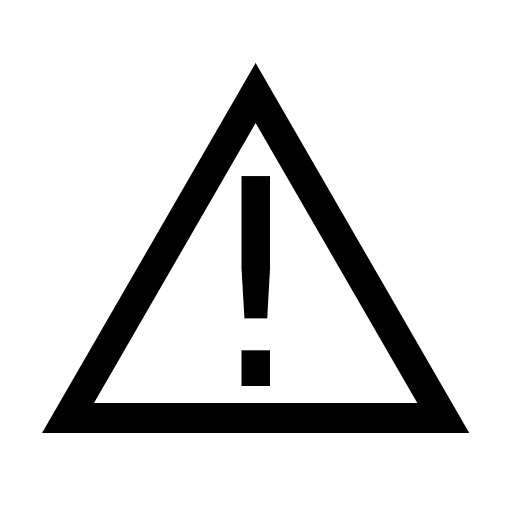
<style>
.page{position:relative;width:512px;height:512px;background:#ffffff}
.page>*{position:absolute;margin:0}
.t1{font:288px "DejaVuSans";color:#000000}
</style>
<div class="page">
<p class="t1" style="left:241px;top:176px;width:29px;height:210px">!</p>
</div>
